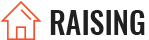
<style>
.page{position:relative;width:149px;height:40px;background:#ffffff}
.page>*{position:absolute;margin:0}
.t1{font:30px "Oswald-Medium";color:#202020}
</style>
<div class="page">
<p class="t1" style="left:50px;top:10px;width:95px;height:25px">RAISING</p>
</div>
